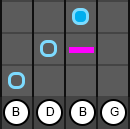
<style>
.page{position:relative;width:130px;height:129px;background:#5b5b5b}
.page>*{position:absolute;margin:0}
.t1{font:12px "ArialMT";color:#000000}
</style>
<div class="page">
<p class="t1" style="left:12px;top:107px;width:8px;height:9px">B</p>
<p class="t1" style="left:46px;top:107px;width:9px;height:9px">D</p>
<p class="t1" style="left:79px;top:107px;width:8px;height:9px">B</p>
<p class="t1" style="left:110px;top:107px;width:9px;height:9px">G</p>
</div>
